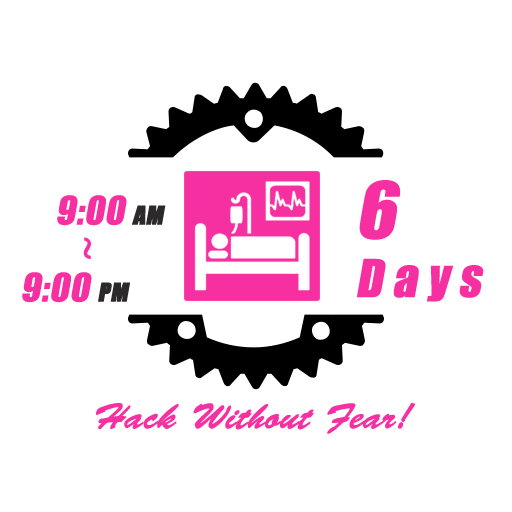
<style>
.page{position:relative;width:512px;height:512px;background:#ffffff}
.page>*{position:absolute;margin:0}
.t1{font:72px "Impact";color:#f730a1;font-weight:bold;font-style:italic}
.t2{font:36px "Impact";color:#f730a1;font-weight:bold;font-style:italic}
.t3{font:24px "Impact";color:#2c292b;font-weight:bold;font-style:italic}
.t4{font:36px "AdobeHeitiStd-Regular";color:#f730a1;font-weight:bold;font-style:italic}
.t5{font:48px "Impact";letter-spacing:0.18em;color:#f730a1;font-weight:bold;font-style:italic}
.t6{font:36px "BrushScriptStd";color:#f730a1;font-weight:bold;font-style:italic}
</style>
<div class="page">
<p class="t1" style="left:359px;top:180px;width:42px;height:60px">6</p>
<p class="t2" style="left:57px;top:195px;width:109px;height:31px">9:00 <span class="t3">AM</span></p>
<p class="t4" style="left:83px;top:237px;width:8px;height:22px">~</p>
<p class="t5" style="left:357px;top:258px;width:127px;height:44px">Days</p>
<p class="t2" style="left:22px;top:272px;width:108px;height:31px">9:00 <span class="t3">PM</span></p>
<p class="t6" style="left:96px;top:403px;width:320px;height:31px">Hack Without Fear!</p>
</div>
